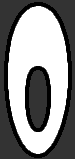
<style>
.page{position:relative;width:75px;height:159px;background:#ffffff}
.page>*{position:absolute;margin:0}
.t1{font:200px "ShowcardGothic-Reg";color:#ffffff;scale:0.62 1}
</style>
<div class="page">
<p class="t1" style="left:4px;top:2px;width:68px;height:156px">0</p>
</div>
